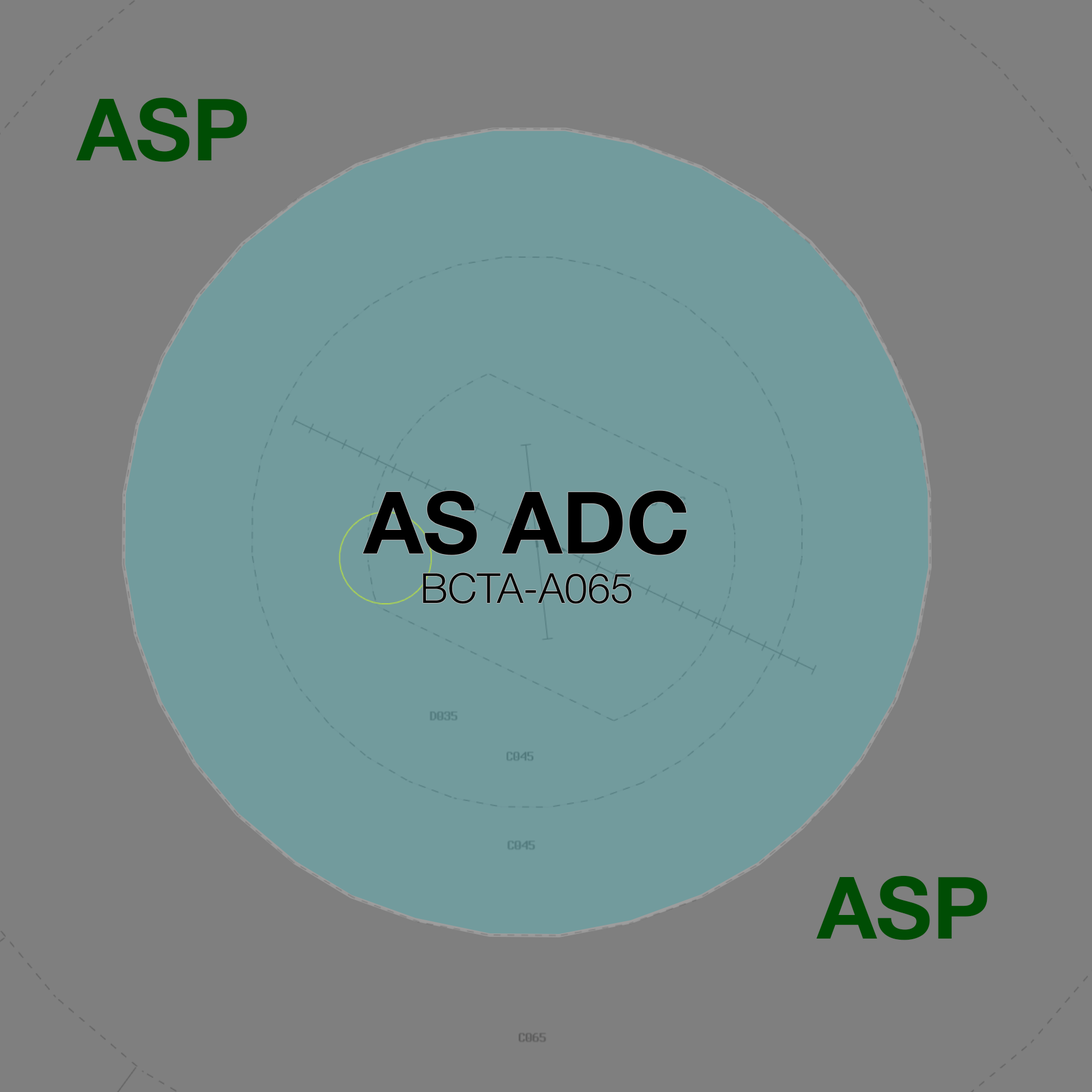
<style>
.page{position:relative;width:1092px;height:1092px;background:#7f7f7f}
.page>*{position:absolute;margin:0}
.t1{font:86.2px "HelveticaNeue-Bold";color:#004d04}
.t2{font:41.4px "HelveticaNeue-Light";color:#000000}
.t3{font:86.2px "HelveticaNeue-Bold";color:#000000}
</style>
<div class="page">
<p class="t1" style="left:76px;top:97px;width:171px;height:65px">ASP</p>
<p class="t2" style="left:363px;top:490px;width:324px;height:114px;text-align:center"><span class="t3">AS ADC<br></span>BCTA-A065</p>
<p class="t1" style="left:816px;top:875px;width:171px;height:65px">ASP</p>
</div>
